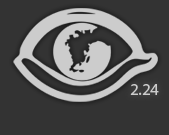
<style>
.page{position:relative;width:169px;height:135px;background:#333333}
.page>*{position:absolute;margin:0}
.t1{font:16.7px "MyriadPro-Regular";color:#cccccc}
</style>
<div class="page">
<p class="t1" style="left:130px;top:84px;width:29px;height:11px">2.24</p>
</div>
